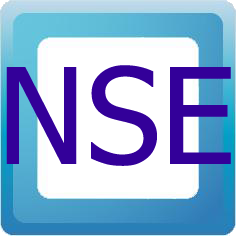
<style>
.page{position:relative;width:236px;height:236px;background:#ffffff}
.page>*{position:absolute;margin:0}
.t1{font:133.3px "Tahoma";color:#330099}
</style>
<div class="page">
<p class="t1" style="left:6px;top:65px;width:225px;height:101px">NSE</p>
</div>
